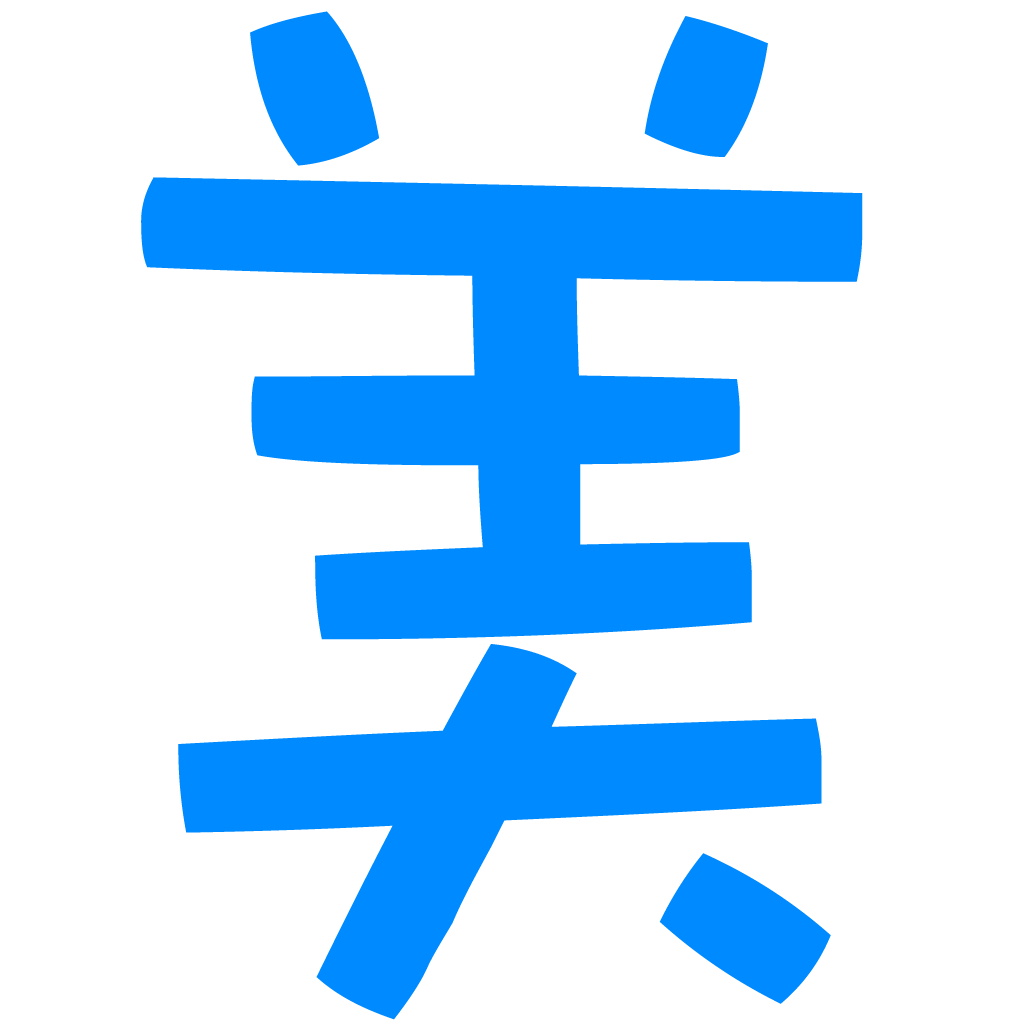
<style>
.page{position:relative;width:1024px;height:1024px;background:#ffffff}
.page>*{position:absolute;margin:0}
.t1{font:1200px "DFWaWaSC-W5";color:#008aff;font-weight:bold}
</style>
<div class="page">
<p class="t1" style="left:141px;top:11px;width:722px;height:1009px">美</p>
</div>
